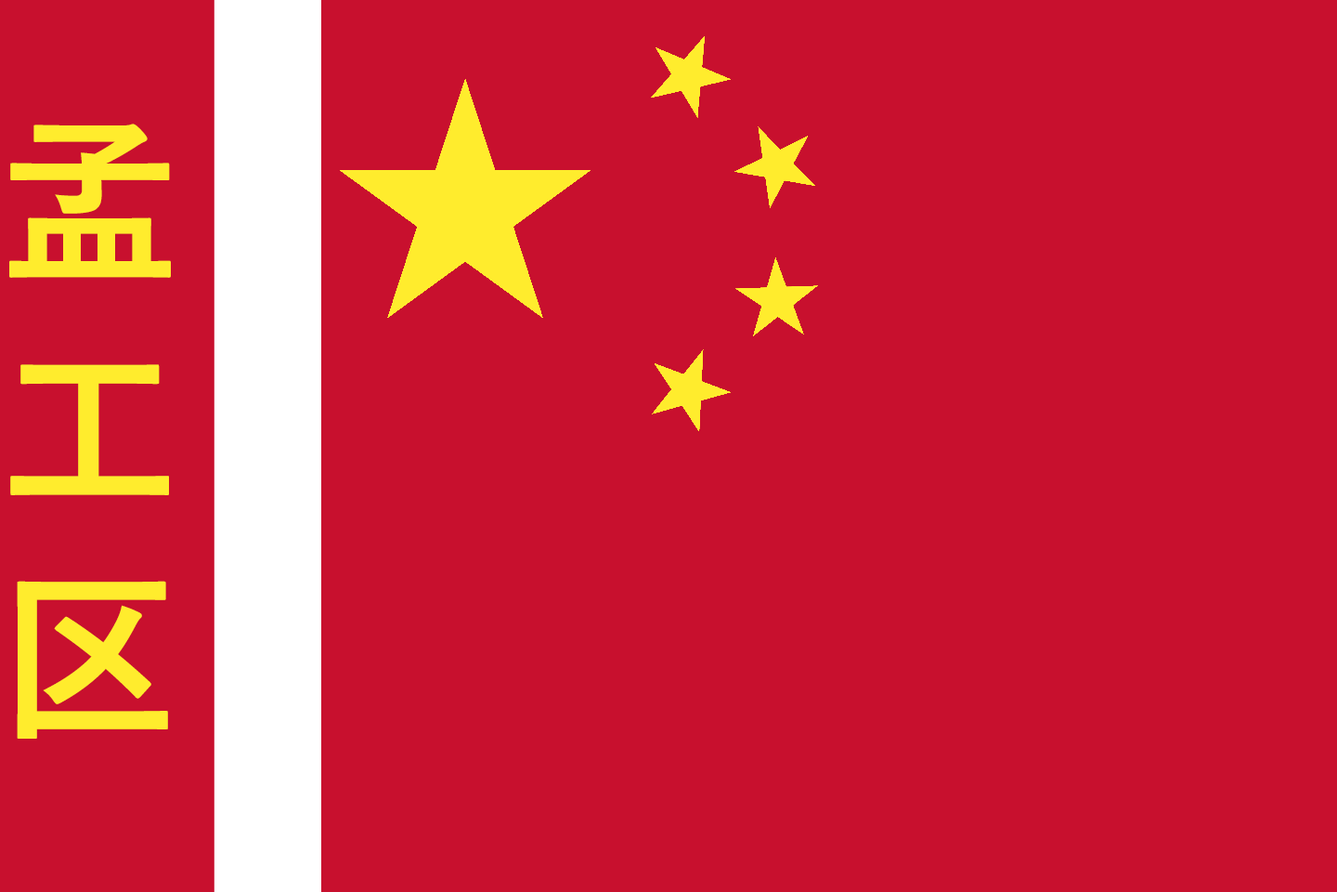
<style>
.page{position:relative;width:1337px;height:892px;background:#c8102e}
.page>*{position:absolute;margin:0}
.t1{font:179.4px/227.3px "YuGothicUI-Bold";letter-spacing:0.2em;color:#ffec2d}
</style>
<div class="page">
<p class="t1" style="left:9px;top:124px;width:162px;height:614px">孟<br>工<br>区</p>
</div>
